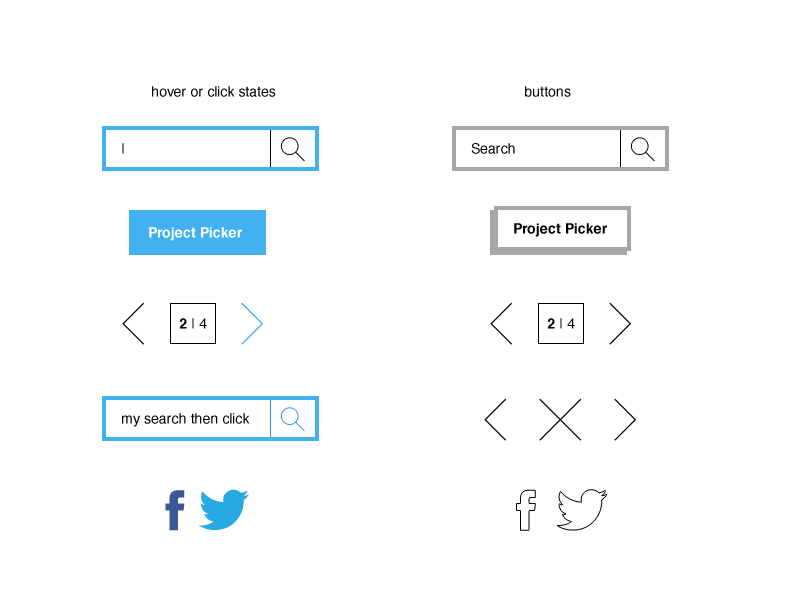
<style>
.page{position:relative;width:800px;height:600px;background:#ffffff}
.page>*{position:absolute;margin:0}
.t1{font:14px "Helvetica";color:#000000}
.t2{font:14px "Helvetica"}
.t3{font:14px "Helvetica-Bold";color:#ffffff}
.t4{font:14px "Helvetica-Bold";color:#000000}
</style>
<div class="page">
<p class="t1" style="left:152px;top:86px;width:124px;height:11px">hover or click states</p>
<p class="t1" style="left:525px;top:86px;width:46px;height:11px">buttons</p>
<p class="t2" style="left:122px;top:143px;width:2px;height:11px">|</p>
<p class="t1" style="left:471px;top:143px;width:44px;height:11px">Search</p>
<p class="t3" style="left:149px;top:227px;width:93px;height:14px">Project Picker</p>
<p class="t4" style="left:514px;top:223px;width:93px;height:14px">Project Picker</p>
<p class="t1" style="left:179px;top:318px;width:28px;height:11px"><span class="t4">2</span> | 4</p>
<p class="t1" style="left:547px;top:318px;width:28px;height:11px"><span class="t4">2</span> | 4</p>
<p class="t1" style="left:122px;top:413px;width:128px;height:14px">my search then click</p>
</div>
